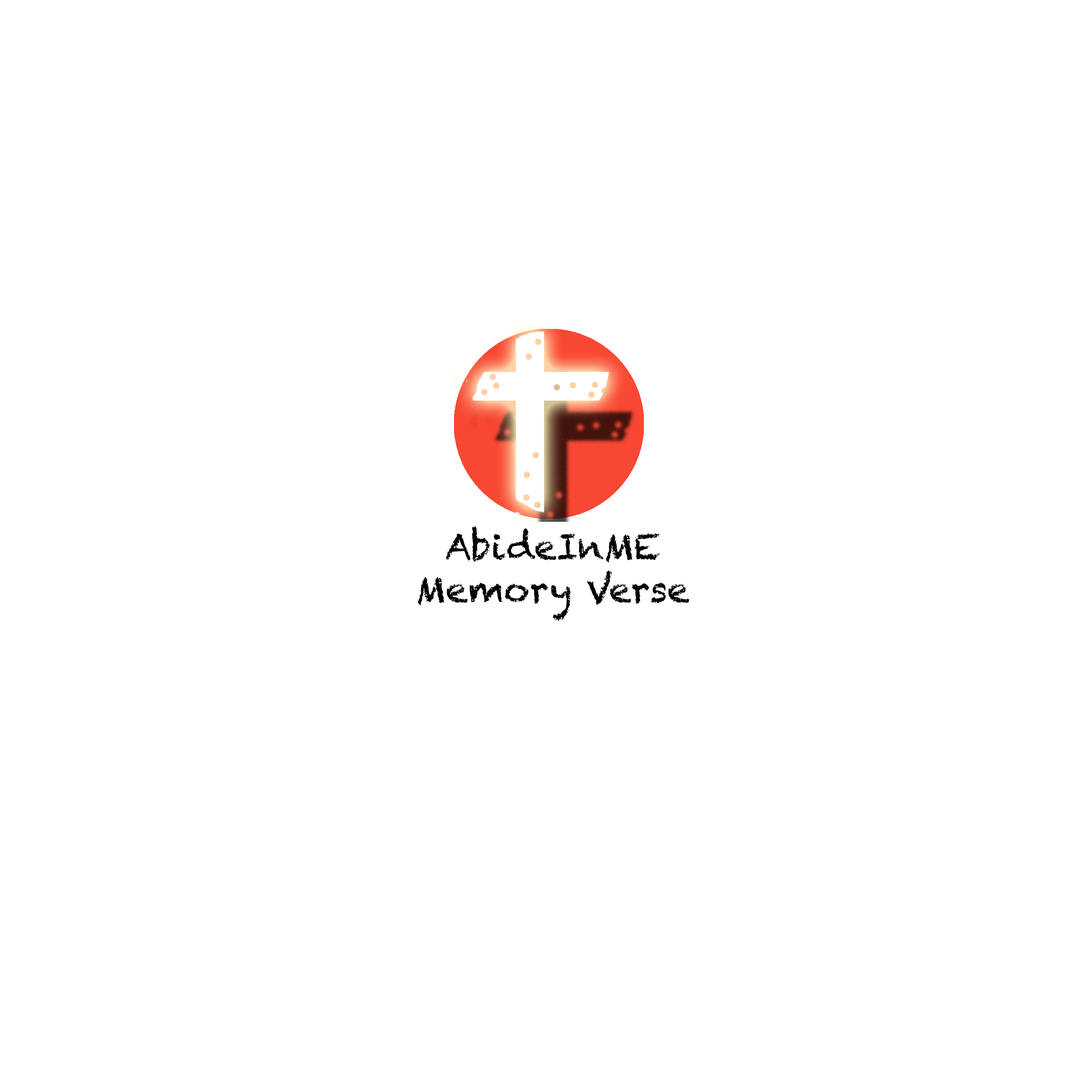
<style>
.page{position:relative;width:1092px;height:1092px;background:#ffffff}
.page>*{position:absolute;margin:0}
.t1{font:35.6px "Chalkduster";color:#000000}
</style>
<div class="page">
<p class="t1" style="left:418px;top:526px;width:271px;height:95px;text-align:center">AbideInME <br>Memory Verse</p>
</div>
